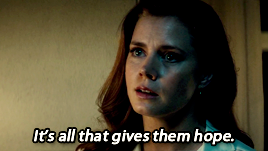
<style>
.page{position:relative;width:268px;height:151px;background:#000000}
.page>*{position:absolute;margin:0}
.t1{font:16px "MyriadPro-Regular";color:#ffffff;font-weight:bold;font-style:italic}
</style>
<div class="page">
<p class="t1" style="left:34px;top:129px;width:200px;height:16px">It’s all that gives them hope.</p>
</div>
